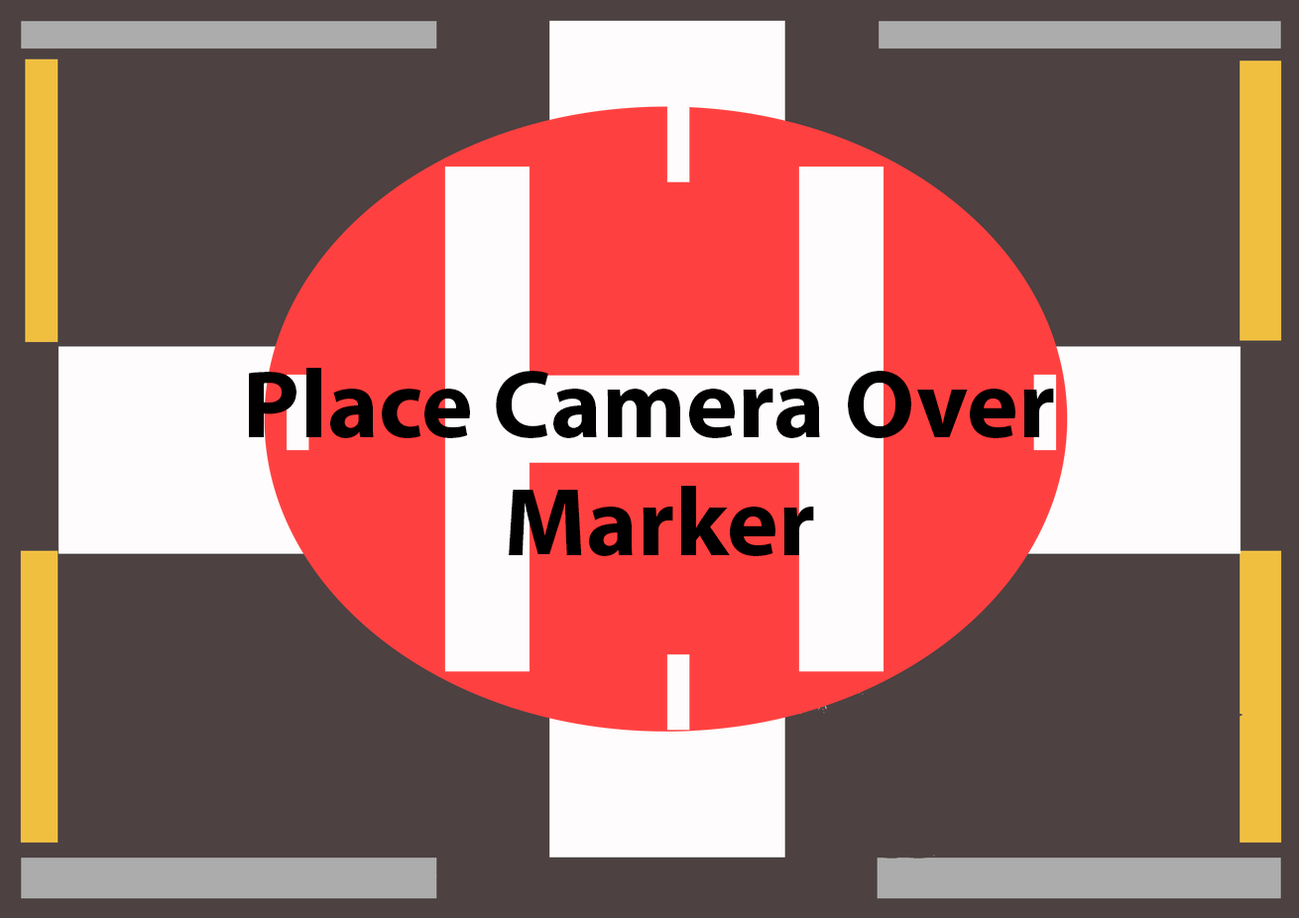
<style>
.page{position:relative;width:1299px;height:918px;background:#4d4141}
.page>*{position:absolute;margin:0}
.t1{font:97.8px "MyriadPro-Bold";color:#000000}
</style>
<div class="page">
<p class="t1" style="left:249px;top:368px;width:805px;height:188px;text-align:center">Place Camera Over <br>Marker</p>
</div>
